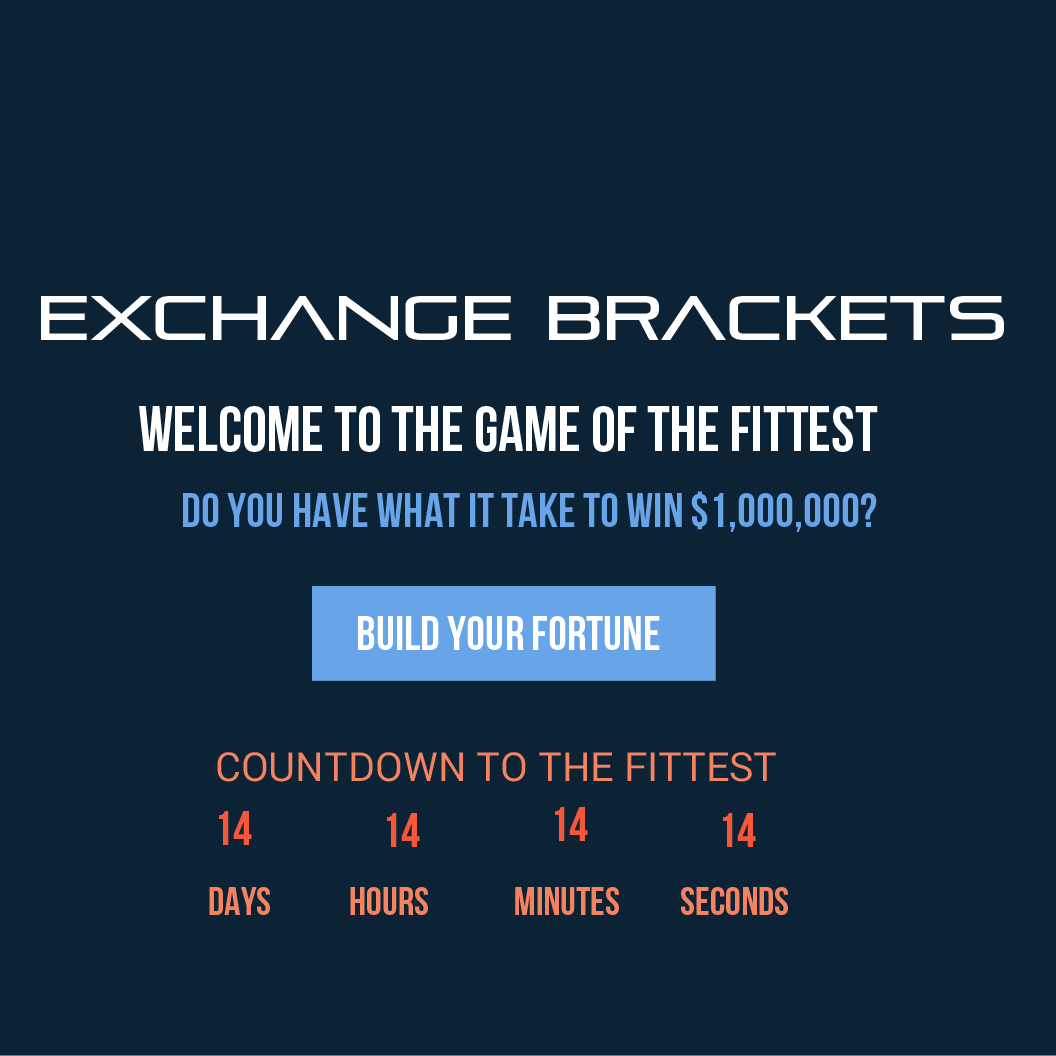
<style>
.page{position:relative;width:1056px;height:1056px;background:#0c2336}
.page>*{position:absolute;margin:0}
.t1{font:63px "PirulenRg-Regular";color:#ffffff}
.t2{font:63px "BebasNeue";color:#ffffff}
.t3{font:48px "BebasNeue";color:#67a4e8}
.t4{font:48px "BebasNeue";color:#ffffff}
.t5{font:40px "Roboto-Regular";color:#f58360}
.t6{font:48px "BebasNeue";color:#f4573c}
.t7{font:40px "BebasNeue";color:#f58360}
</style>
<div class="page">
<p class="t1" style="left:41px;top:296px;width:963px;height:44px">EXCHANGE BRACKETS</p>
<p class="t2" style="left:139px;top:406px;width:739px;height:46px">Welcome to the Game of the Fittest</p>
<p class="t3" style="left:183px;top:491px;width:694px;height:41px">Do you have what it take to win $1,000,000?</p>
<p class="t4" style="left:358px;top:616px;width:302px;height:34px">Build your fortune</p>
<p class="t5" style="left:217px;top:752px;width:559px;height:30px">COUNTDOWN TO THE FITTEST</p>
<p class="t6" style="left:555px;top:807px;width:33px;height:34px">14</p>
<p class="t6" style="left:219px;top:811px;width:33px;height:34px">14</p>
<p class="t6" style="left:387px;top:813px;width:33px;height:34px">14</p>
<p class="t6" style="left:723px;top:813px;width:33px;height:34px">14</p>
<p class="t7" style="left:209px;top:887px;width:61px;height:28px">Days</p>
<p class="t7" style="left:350px;top:887px;width:78px;height:28px">Hours</p>
<p class="t7" style="left:515px;top:887px;width:104px;height:28px">Minutes</p>
<p class="t7" style="left:681px;top:887px;width:107px;height:28px">Seconds</p>
</div>
